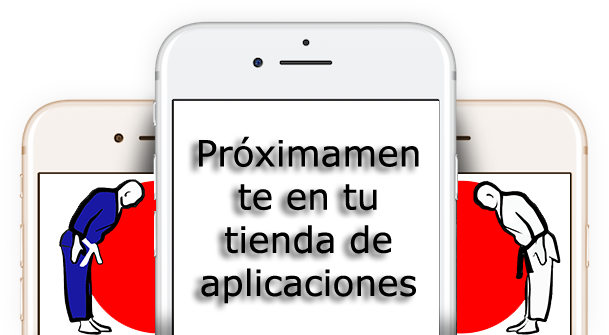
<style>
.page{position:relative;width:609px;height:335px;background:#ffffff}
.page>*{position:absolute;margin:0}
.t1{font:36px "Verdana";color:#000000}
</style>
<div class="page">
<p class="t1" style="left:199px;top:136px;width:220px;height:168px;text-align:center">Próximamente en tu tienda de aplicaciones</p>
</div>
